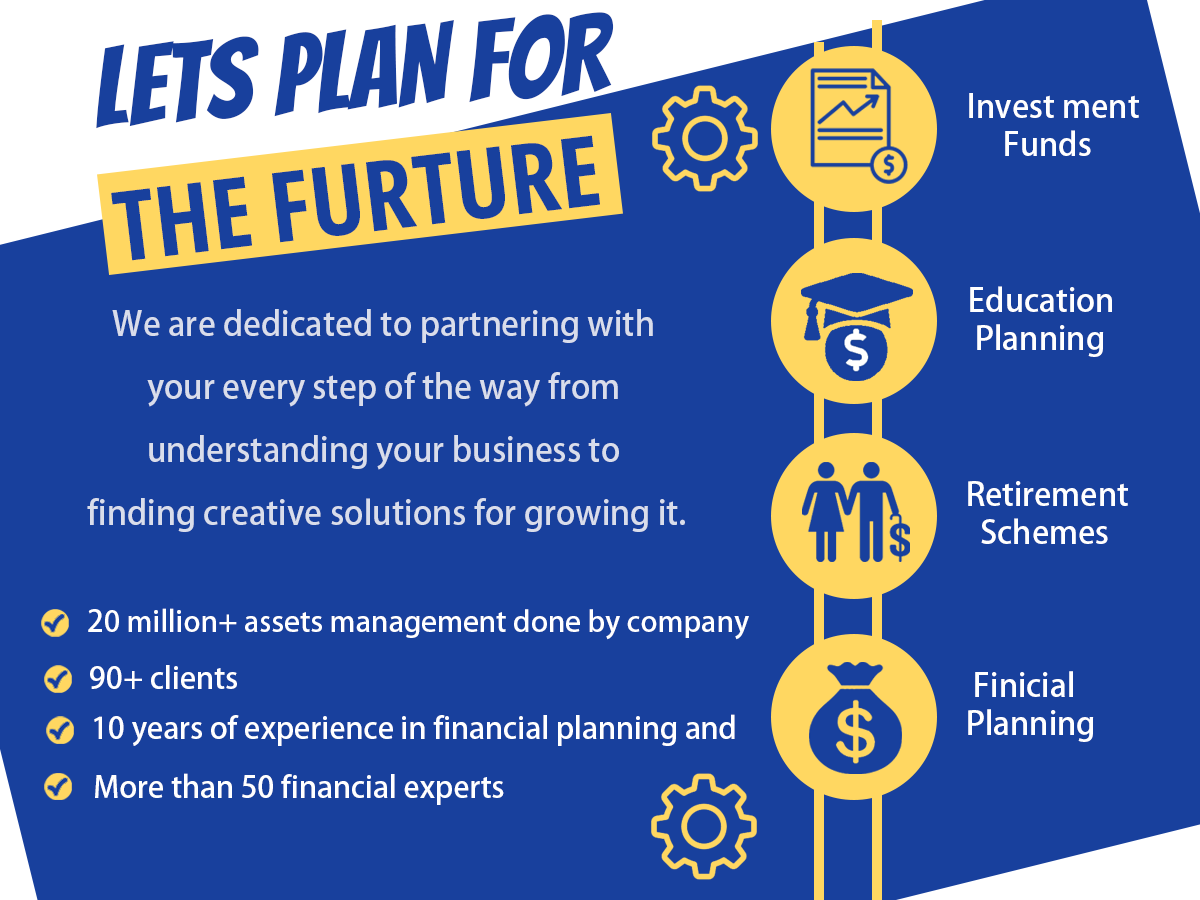
<style>
.page{position:relative;width:1200px;height:900px;background:#18409d}
.page>*{position:absolute;margin:0}
.t1{font:110.5px "Bangers-Regular";color:#18409d;text-transform:uppercase}
.t2{font:32px "AdobeFanHeitiStd-Bold";color:#ffffff}
.t3{font:97.3px "OpenSansRoman-CondensedBold";color:#18409d;text-transform:uppercase}
.t4{font:33px/63px "AdobeFanHeitiStd-Bold";color:#d9ddeb}
.t5{font:28.9px "AdobeFanHeitiStd-Bold";color:#ffffff}
.t6{font:29.9px "AdobeFanHeitiStd-Bold";color:#ffffff}
.t7{font:32px "AdobeFanHeitiStd-Bold";color:#000000}
</style>
<div class="page">
<p class="t1" style="left:96px;top:12px;width:518px;height:117px;rotate:-4deg">lets plan for</p>
<p class="t2" style="left:969px;top:93px;width:170px;height:63px">Invest ment <br>     Funds</p>
<p class="t3" style="left:111px;top:135px;width:489px;height:126px;rotate:-7deg">the furture</p>
<p class="t2" style="left:970px;top:286px;width:142px;height:71px">Education <br> Planning</p>
<p class="t4" style="left:87px;top:309px;width:598px;height:223px;text-align:center">We are dedicated to partnering with <br>your every step of the way from <br>understanding your business to <br>finding creative solutions for growing it.</p>
<p class="t2" style="left:968px;top:481px;width:160px;height:63px">Retirement <br>  Schemes</p>
<p class="t5" style="left:88px;top:608px;width:661px;height:32px"><span class="t6">2</span>0 million+ assets management done by company</p>
<p class="t6" style="left:90px;top:665px;width:147px;height:24px">90+ clients</p>
<p class="t2" style="left:968px;top:671px;width:126px;height:71px"><span class="t7"> </span>Finicial <br>Planning</p>
<p class="t6" style="left:94px;top:714px;width:641px;height:32px">10 years of experience in financial planning and</p>
<p class="t6" style="left:95px;top:773px;width:409px;height:32px">More than 50 financial experts</p>
</div>
